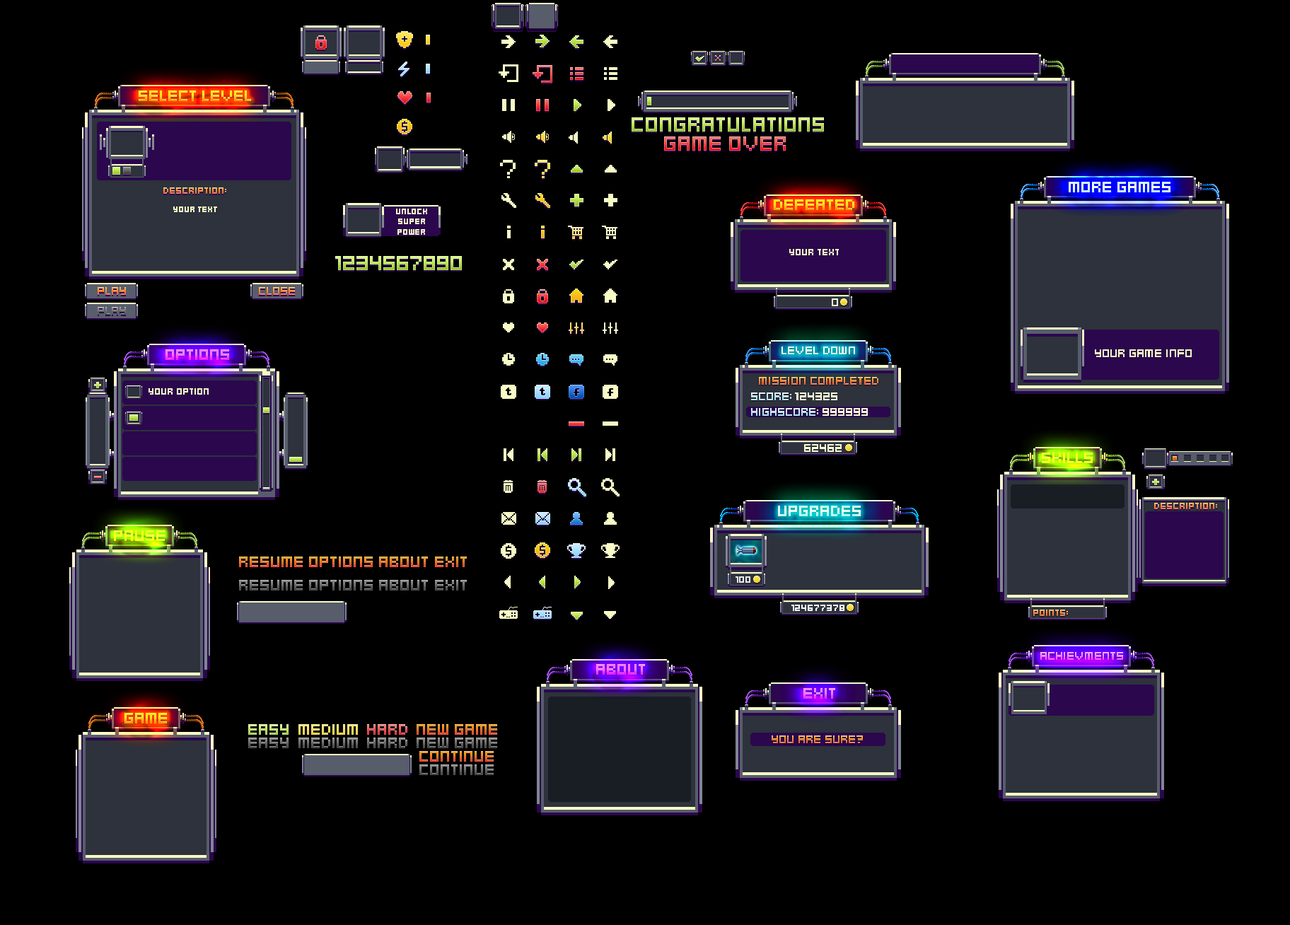
<style>
.page{position:relative;width:1290px;height:925px;background:#000000}
.page>*{position:absolute;margin:0}
.t1{font:17px "KenPixel-Mini-Square"}
.t2{font:22.6px "KenPixel-Mini-Square"}
.t3{font:9.9px "KenPixel-Mini-Square"}
.t4{font:8.5px "KenPixel-Mini-Square";color:#f9fbc6}
.t5{font:9.9px "KenPixel-Mini-Square";color:#f9fbc6}
.t6{font:12.7px "KenPixel-Mini-Square"}
.t7{font:12.7px "KenPixel-Mini-Square";color:#fafad6}
.t8{font:12.7px "KenPixel-Mini-Square";color:#edffff}
.t9{font:12.7px "KenPixel-Mini-Square";color:#f9fbc6}
.t10{font:9.9px "KenPixel-Mini-Square";color:#eaeaea}
.t11{font:9.9px "KenPixel-Mini-Square";color:#ffffff}
</style>
<div class="page">
<p class="t1" style="left:139px;top:90px;width:112px;height:11px">SELECT LEVEL</p>
<p class="t1" style="left:139px;top:90px;width:112px;height:11px">SELECT LEVEL</p>
<p class="t2" style="left:631px;top:119px;width:193px;height:14px">CONGRATULATIONS</p>
<p class="t2" style="left:631px;top:117px;width:193px;height:14px">CONGRATULATIONS</p>
<p class="t2" style="left:664px;top:138px;width:121px;height:14px">GAME OVER</p>
<p class="t2" style="left:664px;top:136px;width:121px;height:15px">GAME OVER</p>
<p class="t1" style="left:1068px;top:182px;width:102px;height:10px">MORE GAMES</p>
<p class="t1" style="left:1068px;top:182px;width:102px;height:10px">MORE GAMES</p>
<p class="t3" style="left:163px;top:187px;width:63px;height:7px">DESCRIPTION:</p>
<p class="t4" style="left:173px;top:206px;width:44px;height:6px">Your TEXT</p>
<p class="t4" style="left:396px;top:209px;width:31px;height:26px;text-align:center">UNLOCK<br>SUPER<br>POWER</p>
<p class="t1" style="left:773px;top:199px;width:81px;height:11px">DEFEATED</p>
<p class="t1" style="left:773px;top:199px;width:81px;height:11px">DEFEATED</p>
<p class="t2" style="left:335px;top:257px;width:6px;height:14px">1</p>
<p class="t2" style="left:335px;top:256px;width:6px;height:14px">1</p>
<p class="t2" style="left:343px;top:256px;width:11px;height:14px">2</p>
<p class="t2" style="left:356px;top:256px;width:12px;height:14px">3</p>
<p class="t2" style="left:370px;top:257px;width:11px;height:14px">4</p>
<p class="t2" style="left:370px;top:256px;width:11px;height:14px">4</p>
<p class="t2" style="left:383px;top:256px;width:11px;height:14px">5</p>
<p class="t2" style="left:397px;top:256px;width:11px;height:14px">6</p>
<p class="t2" style="left:410px;top:257px;width:11px;height:14px">7</p>
<p class="t2" style="left:410px;top:256px;width:11px;height:14px">7</p>
<p class="t2" style="left:423px;top:256px;width:12px;height:14px">8</p>
<p class="t2" style="left:437px;top:256px;width:11px;height:14px">9</p>
<p class="t2" style="left:450px;top:257px;width:12px;height:14px">0</p>
<p class="t2" style="left:450px;top:256px;width:12px;height:14px">0</p>
<p class="t5" style="left:789px;top:249px;width:49px;height:6px">YOUR TEXT</p>
<p class="t6" style="left:98px;top:288px;width:28px;height:8px">play</p>
<p class="t6" style="left:98px;top:287px;width:28px;height:8px">play</p>
<p class="t6" style="left:259px;top:288px;width:36px;height:8px">CLOSE</p>
<p class="t6" style="left:259px;top:287px;width:36px;height:8px">CLOSE</p>
<p class="t7" style="left:831px;top:298px;width:7px;height:8px">0</p>
<p class="t6" style="left:98px;top:308px;width:28px;height:8px">PLAY</p>
<p class="t6" style="left:98px;top:307px;width:28px;height:8px">PLAY</p>
<p class="t1" style="left:165px;top:349px;width:64px;height:11px">OPTIONS</p>
<p class="t1" style="left:165px;top:349px;width:64px;height:11px">OPTIONS</p>
<p class="t8" style="left:781px;top:346px;width:74px;height:8px">LEVEL DOWN</p>
<p class="t8" style="left:781px;top:346px;width:74px;height:8px">LEVEL DOWN</p>
<p class="t9" style="left:1094px;top:349px;width:97px;height:8px">YOUR GAME INFO</p>
<p class="t6" style="left:759px;top:377px;width:119px;height:8px">MISSION COMPLETED</p>
<p class="t5" style="left:148px;top:388px;width:61px;height:6px">YOUR OPTION</p>
<p class="t6" style="left:751px;top:392px;width:40px;height:8px">SCORE:</p>
<p class="t7" style="left:795px;top:392px;width:42px;height:8px">124325</p>
<p class="t6" style="left:751px;top:408px;width:67px;height:8px">HIGHSCORE:</p>
<p class="t7" style="left:822px;top:408px;width:45px;height:8px">999999</p>
<p class="t7" style="left:804px;top:444px;width:37px;height:8px">62462</p>
<p class="t1" style="left:1041px;top:452px;width:51px;height:11px">SKILLS</p>
<p class="t1" style="left:1041px;top:452px;width:51px;height:11px">SKILLS</p>
<p class="t1" style="left:778px;top:505px;width:82px;height:11px">UPGRADES</p>
<p class="t1" style="left:778px;top:505px;width:82px;height:11px">UPGRADES</p>
<p class="t3" style="left:1154px;top:503px;width:63px;height:6px">DESCRIPTION:</p>
<p class="t1" style="left:114px;top:530px;width:51px;height:11px">PAUSE</p>
<p class="t1" style="left:114px;top:530px;width:51px;height:11px">PAUSE</p>
<p class="t1" style="left:239px;top:556px;width:64px;height:11px">RESUME</p>
<p class="t1" style="left:309px;top:556px;width:64px;height:11px">OPTIONS</p>
<p class="t1" style="left:379px;top:556px;width:49px;height:11px">ABOUT</p>
<p class="t1" style="left:435px;top:556px;width:32px;height:11px">EXIT</p>
<p class="t1" style="left:239px;top:580px;width:64px;height:10px">RESUME</p>
<p class="t1" style="left:309px;top:580px;width:64px;height:10px">OPTIONS</p>
<p class="t1" style="left:379px;top:580px;width:49px;height:10px">ABOUT</p>
<p class="t1" style="left:435px;top:580px;width:32px;height:10px">EXIT</p>
<p class="t10" style="left:735px;top:576px;width:15px;height:7px">100</p>
<p class="t11" style="left:791px;top:604px;width:53px;height:7px">124677378</p>
<p class="t3" style="left:1033px;top:609px;width:35px;height:7px">POINTS:</p>
<p class="t6" style="left:1040px;top:652px;width:83px;height:8px">ACHIEVMENTS</p>
<p class="t6" style="left:1040px;top:652px;width:83px;height:8px">ACHIEVMENTS</p>
<p class="t1" style="left:596px;top:664px;width:49px;height:10px">ABOUT</p>
<p class="t1" style="left:596px;top:664px;width:49px;height:10px">ABOUT</p>
<p class="t1" style="left:803px;top:688px;width:32px;height:10px">EXIT</p>
<p class="t1" style="left:803px;top:688px;width:32px;height:10px">EXIT</p>
<p class="t1" style="left:124px;top:713px;width:43px;height:10px">GAME</p>
<p class="t1" style="left:124px;top:713px;width:43px;height:10px">GAME</p>
<p class="t1" style="left:248px;top:724px;width:40px;height:11px">EASY</p>
<p class="t1" style="left:298px;top:724px;width:60px;height:11px">MEDIUM</p>
<p class="t1" style="left:367px;top:724px;width:40px;height:11px">HARD</p>
<p class="t1" style="left:416px;top:724px;width:81px;height:11px">NEW GAME</p>
<p class="t1" style="left:248px;top:737px;width:40px;height:11px">EASY</p>
<p class="t1" style="left:298px;top:737px;width:60px;height:11px">MEDIUM</p>
<p class="t1" style="left:367px;top:737px;width:40px;height:11px">HARD</p>
<p class="t1" style="left:416px;top:737px;width:81px;height:11px">NEW GAME</p>
<p class="t6" style="left:771px;top:735px;width:92px;height:8px">YOU ARE SURE?</p>
<p class="t1" style="left:419px;top:751px;width:74px;height:10px">CONTINUE</p>
<p class="t1" style="left:419px;top:764px;width:74px;height:11px">CONTINUE</p>
</div>
